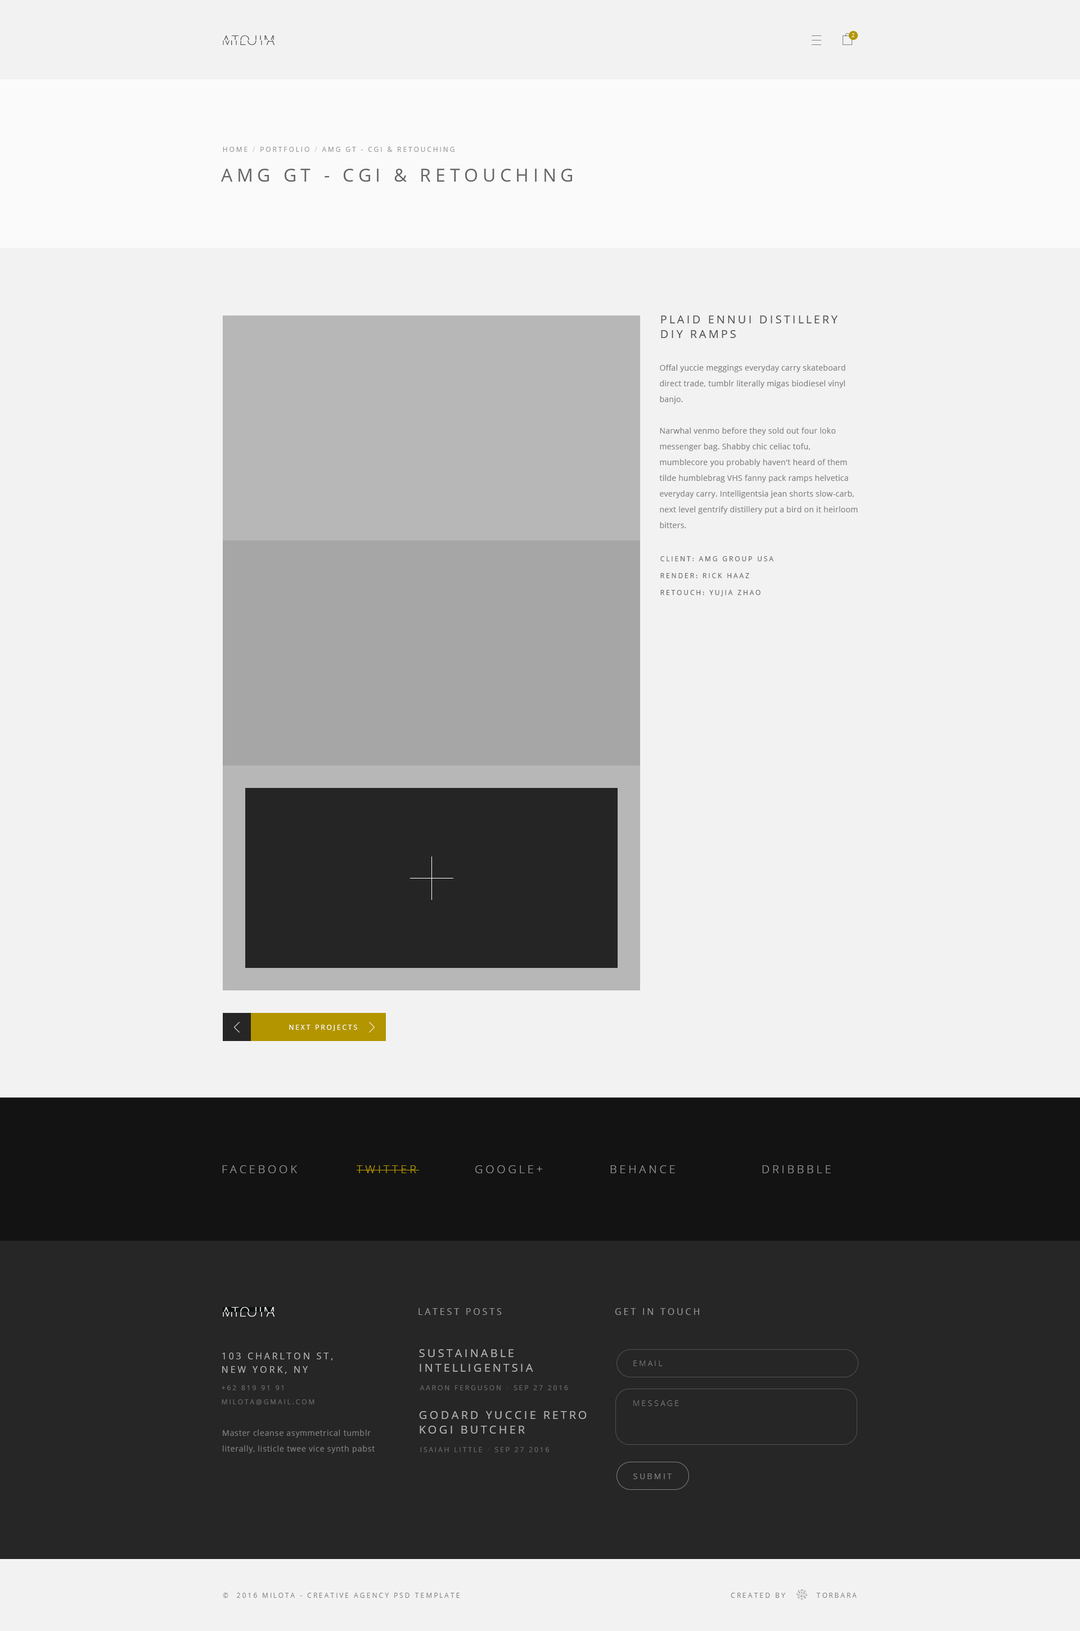
<style>
.page{position:relative;width:1080px;height:1631px;background:#f2f2f2}
.page>*{position:absolute;margin:0}
.t1{font:13.5px "OpenSans-Light";letter-spacing:0.08em;text-transform:uppercase}
.t2{font:5.6px "OpenSans-Light";letter-spacing:0.28em;color:#ffffff;text-transform:uppercase}
.t3{font:6.8px "OpenSans";letter-spacing:0.24em;color:#999999;text-transform:uppercase}
.t4{font:6.8px "OpenSans";letter-spacing:0.24em;color:#cccccc;text-transform:uppercase}
.t5{font:18px "OpenSans";letter-spacing:0.24em;color:#666666;text-transform:uppercase}
.t6{font:11.2px/14.6px "OpenSans";letter-spacing:0.2em;color:#4d4d4d;text-transform:uppercase}
.t7{font:7.9px/15.8px "OpenSans";letter-spacing:0.02em;color:#808080}
.t8{font:6.8px/16.9px "OpenSans";letter-spacing:0.24em;color:#666666;text-transform:uppercase}
.t9{font:6.8px "OpenSans";letter-spacing:0.24em;color:#ffffff;text-transform:uppercase}
.t10{font:11.2px "OpenSans-Light";letter-spacing:0.24em;color:#999999;text-transform:uppercase}
.t11{font:11.2px "OpenSans-Light";letter-spacing:0.24em;color:#b39500;text-transform:uppercase}
.t12{font:9px "OpenSans";letter-spacing:0.24em;color:#999999;text-transform:uppercase}
.t13{font:11.2px/14.6px "OpenSans";letter-spacing:0.2em;color:#b3b3b3;text-transform:uppercase}
.t14{font:9px/13.5px "OpenSans";letter-spacing:0.24em;color:#b3b3b3;text-transform:uppercase}
.t15{font:7.9px "OpenSans-Light";letter-spacing:0.24em;color:#808080;text-transform:uppercase}
.t16{font:6.8px "OpenSans";letter-spacing:0.24em;color:#666666;text-transform:uppercase}
.t17{font:6.8px "OpenSans";letter-spacing:0.24em;color:#333333;text-transform:uppercase}
.t18{font:7.9px/15.8px "OpenSans";letter-spacing:0.04em;color:#808080}
.t19{font:7.9px "OpenSans";letter-spacing:0.24em;color:#808080;text-transform:uppercase}
.t20{font:6.8px "OpenSans";letter-spacing:0.24em;color:#808080;text-transform:uppercase}
</style>
<div class="page">
<p class="t1" style="left:222px;top:35px;width:52px;height:10px;rotate:180deg">milota</p>
<p class="t1" style="left:223px;top:35px;width:51px;height:10px">milota</p>
<p class="t2" style="left:852px;top:33px;width:2px;height:4px">2</p>
<p class="t3" style="left:223px;top:147px;width:231px;height:5px">home <span class="t4">/</span> portfolio <span class="t4">/</span> AMG GT - CGI &amp; Retouching</p>
<p class="t5" style="left:221px;top:169px;width:351px;height:13px">AMG GT - CGI &amp; Retouching</p>
<p class="t6" style="left:661px;top:316px;width:177px;height:22px">Plaid ennui distillery DIY ramps</p>
<p class="t7" style="left:659px;top:364px;width:199px;height:164px">Offal yuccie meggings everyday carry skateboard direct trade, tumblr literally migas biodiesel vinyl banjo.<br><br>Narwhal venmo before they sold out four loko messenger bag. Shabby chic celiac tofu, mumblecore you probably haven't heard of them tilde humblebrag VHS fanny pack ramps helvetica everyday carry. Intelligentsia jean shorts slow-carb, next level gentrify distillery put a bird on it heirloom bitters.<br> Roof party iPhone ugh, bushwick pitchfork single-origin coffee kitsch tumblr four dollar toast chia twee small batch celiac ramps food truck. Stumptown cornhole mixtape, drinking vinegar roof party tattooed retro viral. Chillwave keytar sustainable, letterpress gentrify cronut direct trade ethical plaid. Tote bag listicle paleo ennui.</p>
<p class="t8" style="left:660px;top:556px;width:113px;height:40px">Client: AMG group USA<br>Render: Rick Haaz<br>Retouch: Yujia Zhao</p>
<p class="t9" style="left:289px;top:1025px;width:68px;height:6px">Next projects</p>
<p class="t10" style="left:222px;top:1166px;width:75px;height:7px">facebook</p>
<p class="t11" style="left:357px;top:1166px;width:62px;height:7px">Twitter</p>
<p class="t10" style="left:475px;top:1166px;width:67px;height:7px">Google+</p>
<p class="t10" style="left:610px;top:1166px;width:65px;height:7px">Behance</p>
<p class="t10" style="left:762px;top:1166px;width:69px;height:7px">dribbble</p>
<p class="t1" style="left:222px;top:1307px;width:52px;height:10px;rotate:180deg">milota</p>
<p class="t1" style="left:223px;top:1307px;width:51px;height:10px">milota</p>
<p class="t12" style="left:418px;top:1308px;width:84px;height:7px">Latest posts</p>
<p class="t12" style="left:615px;top:1308px;width:84px;height:7px">Get in touch</p>
<p class="t13" style="left:419px;top:1349px;width:114px;height:23px">Sustainable intelligentsia butcher</p>
<p class="t14" style="left:222px;top:1353px;width:111px;height:21px">103 Charlton St, <br>New York, NY</p>
<p class="t15" style="left:633px;top:1361px;width:30px;height:5px">Email</p>
<p class="t16" style="left:222px;top:1385px;width:62px;height:5px">+62 819 91 91</p>
<p class="t16" style="left:420px;top:1385px;width:148px;height:5px">Aaron Ferguson <span class="t17">/</span> Sep 27 2016</p>
<p class="t16" style="left:222px;top:1400px;width:92px;height:5px">milota@gmail.com</p>
<p class="t15" style="left:633px;top:1401px;width:45px;height:5px">Message</p>
<p class="t13" style="left:419px;top:1411px;width:167px;height:23px">Godard yuccie retro kogi butcher</p>
<p class="t18" style="left:223px;top:1430px;width:152px;height:24px">Master cleanse asymmetrical tumblr literally, listicle twee vice synth pabst<br> fixie etsy squid.</p>
<p class="t16" style="left:420px;top:1447px;width:129px;height:5px">Isaiah Little <span class="t17">/</span> Sep 27 2016</p>
<p class="t19" style="left:633px;top:1474px;width:39px;height:5px">submit</p>
<p class="t20" style="left:223px;top:1593px;width:237px;height:5px">©  2016 MIlota - Creative agency psd template</p>
<p class="t20" style="left:731px;top:1593px;width:126px;height:5px">Created by         Torbara</p>
</div>
